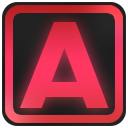
<style>
.page{position:relative;width:128px;height:128px}
.page>*{position:absolute;margin:0}
.t1{font:120.5px "Aux-Bold";color:#f4385a}
</style>
<div class="page">
<p class="t1" style="left:20px;top:22px;width:89px;height:86px">A</p>
</div>
